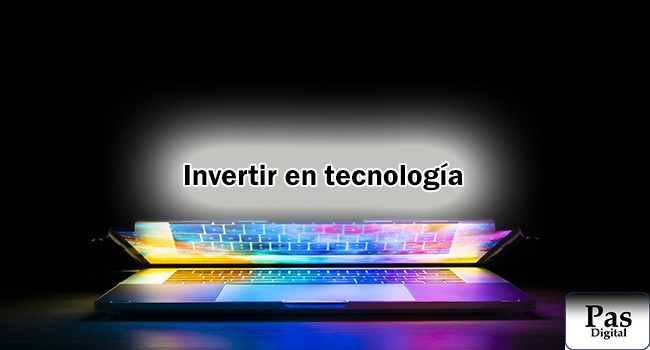
<style>
.page{position:relative;width:650px;height:350px;background:#010101}
.page>*{position:absolute;margin:0}
.t1{font:30px "FranklinGothic-Demi";color:#000000}
</style>
<div class="page">
<p class="t1" style="left:185px;top:162px;width:278px;height:29px">Invertir en tecnología</p>
</div>
